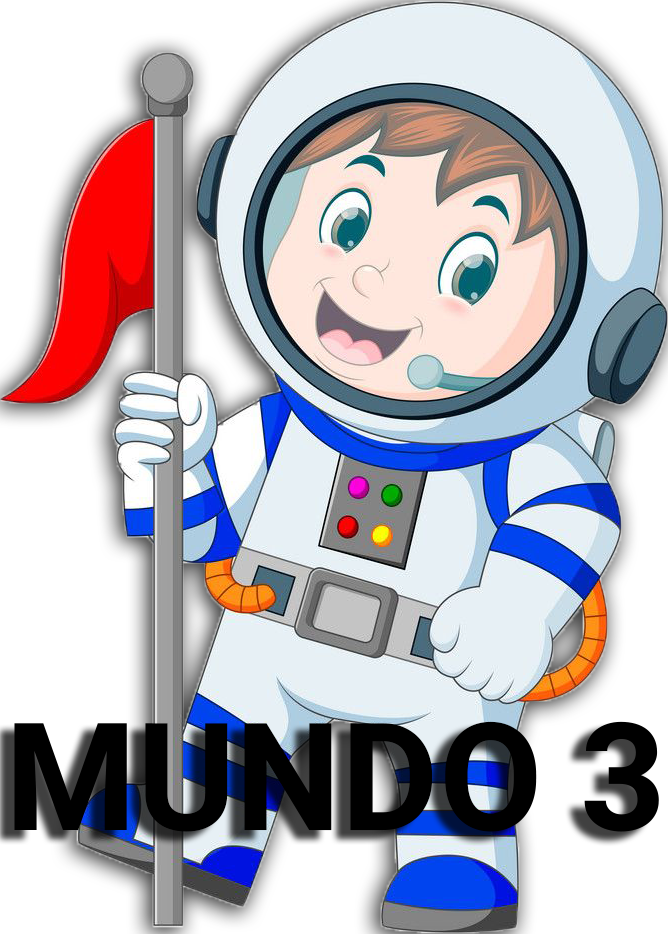
<style>
.page{position:relative;width:668px;height:934px}
.page>*{position:absolute;margin:0}
.t1{font:150px "Roboto-Bold";color:#000000}
</style>
<div class="page">
<p class="t1" style="left:14px;top:721px;width:645px;height:111px">MUNDO 3</p>
</div>
